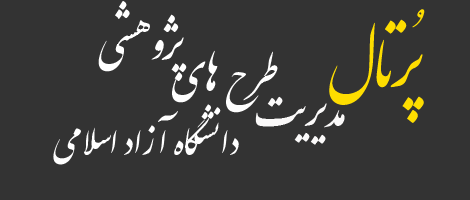
<style>
.page{position:relative;width:470px;height:200px;background:#333333}
.page>*{position:absolute;margin:0}
.t1{font:48px "IranNastaliq";color:#ffffff}
.t2{font:48px "IranNastaliq";color:#000000}
.t3{font:70px "IranNastaliq";color:#fedd00}
.t4{font:48px "IranNastaliq";color:#fbfafa}
.t5{font:40px "IranNastaliq";color:#ffffff}
</style>
<div class="page">
<p class="t1" style="left:98px;top:1px;width:89px;height:80px"><span class="t2"> </span>پژوهشي</p>
<p class="t3" style="left:329px;top:9px;width:96px;height:114px">پُرتـال</p>
<p class="t1" style="left:172px;top:50px;width:106px;height:63px">طرح هاي</p>
<p class="t4" style="left:255px;top:96px;width:90px;height:49px">مديريت</p>
<p class="t5" style="left:53px;top:104px;width:186px;height:61px">دانشگاه آزاد اسلامي</p>
</div>
